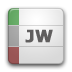
<style>
.page{position:relative;width:72px;height:72px;background:#ffffff}
.page>*{position:absolute;margin:0}
.t1{font:17px "Tahoma-Bold";letter-spacing:0.04em;color:#605e5e;font-weight:bold}
</style>
<div class="page">
<p class="t1" style="left:25px;top:29px;width:28px;height:14px">JW</p>
</div>
